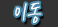
<style>
.page{position:relative;width:58px;height:27px;background:#333333}
.page>*{position:absolute;margin:0}
.t1{font:27px "KCC-eunyoung-Regular";color:#ffffff}
</style>
<div class="page">
<p class="t1" style="left:15px;top:2px;width:27px;height:21px">이동</p>
</div>
